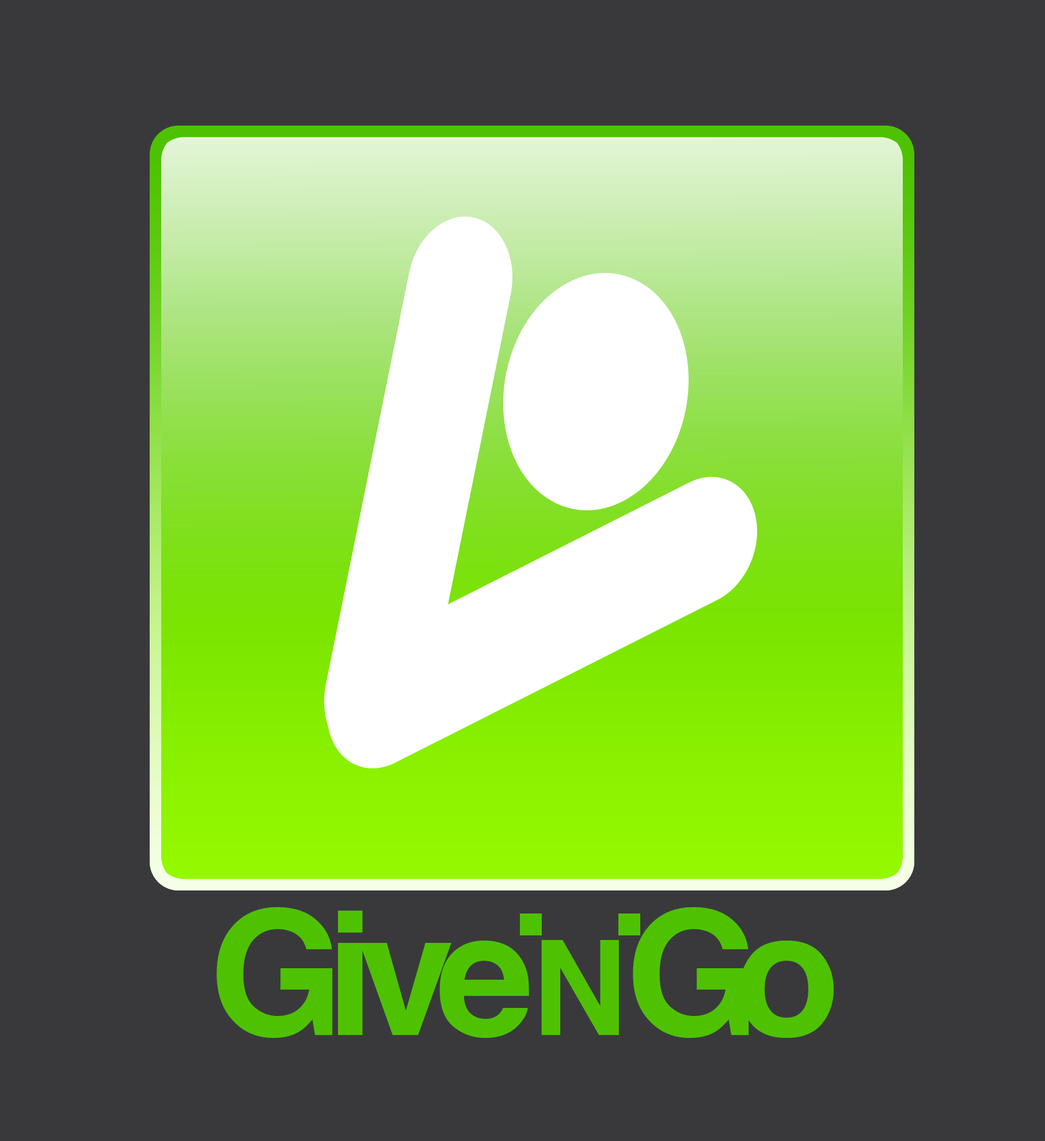
<style>
.page{position:relative;width:1045px;height:1141px;background:#39393c}
.page>*{position:absolute;margin:0}
.t1{font:172.8px "Helvetica-Bold";letter-spacing:-0.1em;color:#4ec200}
.t2{font:172.8px "Helvetica-Bold";letter-spacing:-0.14em;color:#4ec200}
.t3{font:132px "Helvetica-Bold";letter-spacing:-0.14em;color:#4ec200}
.t4{font:172.8px "Helvetica-Bold";letter-spacing:-0.15em;color:#4ec200}
</style>
<div class="page">
<p class="t1" style="left:217px;top:907px;width:617px;height:131px">Giv<span class="t2">e </span><span class="t3">N </span><span class="t4">G</span>o</p>
</div>
